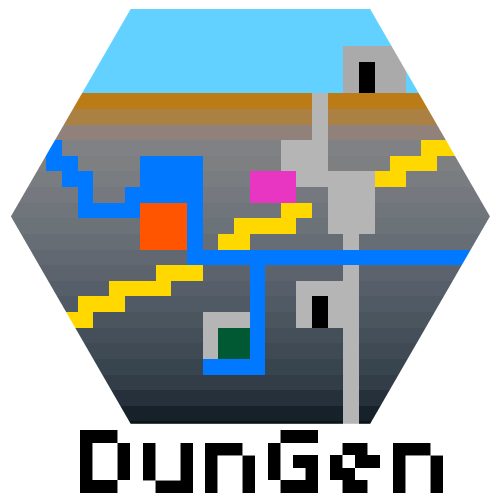
<style>
.page{position:relative;width:500px;height:500px;background:#ffffff}
.page>*{position:absolute;margin:0}
.t1{font:100px "04b03";color:#000000}
</style>
<div class="page">
<p class="t1" style="left:80px;top:430px;width:363px;height:63px">DunGen</p>
</div>
